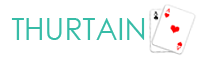
<style>
.page{position:relative;width:200px;height:60px;background:#ffffff}
.page>*{position:absolute;margin:0}
.t1{font:30px "CenturyGothic";color:#37bca7}
</style>
<div class="page">
<p class="t1" style="left:11px;top:18px;width:134px;height:22px">THURTAIN</p>
</div>
